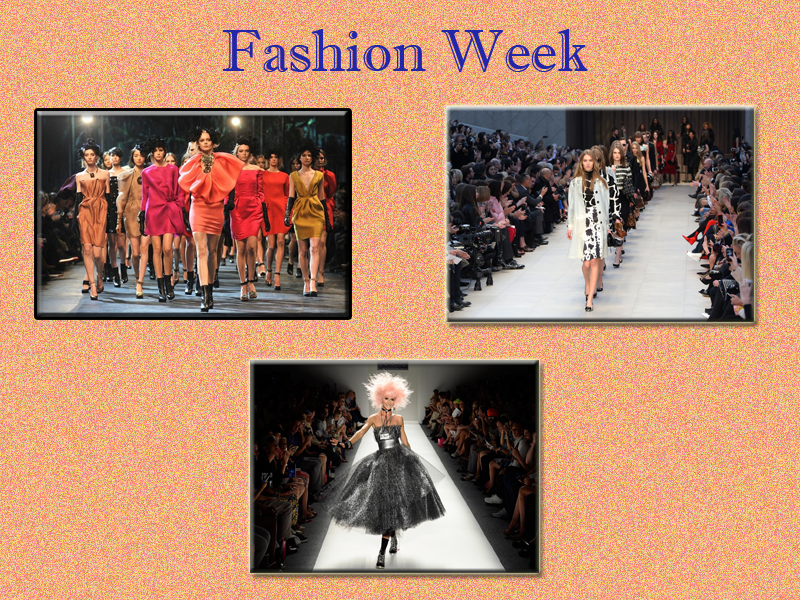
<style>
.page{position:relative;width:800px;height:600px}
.page>*{position:absolute;margin:0}
.t1{font:60px "ImprintMT-Shadow";color:#2226a9}
</style>
<div class="page">
<p class="t1" style="left:222px;top:29px;width:366px;height:43px">Fashion Week</p>
</div>
